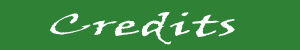
<style>
.page{position:relative;width:300px;height:50px;background:#2f8136}
.page>*{position:absolute;margin:0}
.t1{font:30px "VinerHandITC";color:#ffffff;scale:2 1}
</style>
<div class="page">
<p class="t1" style="left:50px;top:12px;width:185px;height:33px">Credits</p>
</div>
